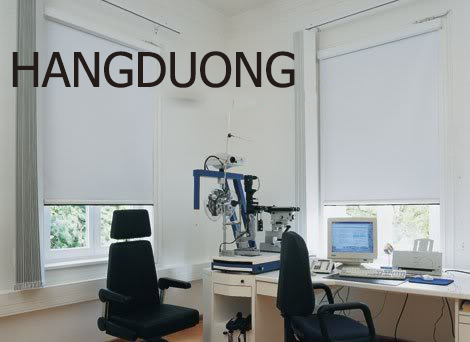
<style>
.page{position:relative;width:470px;height:342px}
.page>*{position:absolute;margin:0}
.t1{font:48px "Tahoma";color:#221b18}
</style>
<div class="page">
<p class="t1" style="left:12px;top:51px;width:283px;height:37px">HANGDUONG</p>
</div>
